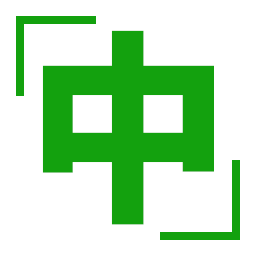
<style>
.page{position:relative;width:256px;height:256px;background:#ffffff}
.page>*{position:absolute;margin:0}
.t1{font:204px "SourceHanSansHC-Heavy";color:#13a10e}
</style>
<div class="page">
<p class="t1" style="left:42px;top:30px;width:172px;height:195px">中</p>
</div>
